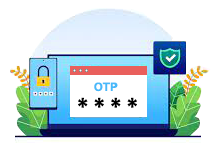
<style>
.page{position:relative;width:219px;height:150px;background:#ffffff}
.page>*{position:absolute;margin:0}
.t1{font:12px "AcuminConcept-Bold";letter-spacing:0.005em;color:#47b9fa}
.t2{font:24px "AcuminConcept-Bold";letter-spacing:0.005em;color:#010101}
</style>
<div class="page">
<p class="t1" style="left:94px;top:82px;width:24px;height:10px">OTP</p>
<p class="t2" style="left:78px;top:97px;width:59px;height:11px">* * * *</p>
</div>
